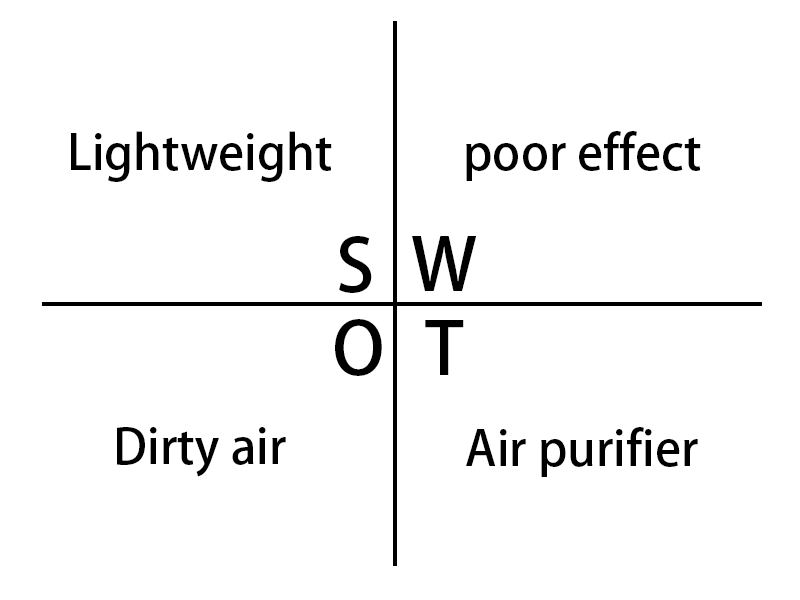
<style>
.page{position:relative;width:800px;height:600px;background:#ffffff}
.page>*{position:absolute;margin:0}
.t1{font:48px "AdobeFanHeitiStd-Bold";color:#000000}
.t2{font:72px "AdobeFanHeitiStd-Bold";color:#000000}
</style>
<div class="page">
<p class="t1" style="left:71px;top:131px;width:261px;height:51px">Lightweight</p>
<p class="t1" style="left:466px;top:131px;width:235px;height:50px">poor effect</p>
<p class="t2" style="left:339px;top:236px;width:33px;height:57px">S</p>
<p class="t2" style="left:412px;top:236px;width:65px;height:55px">W</p>
<p class="t2" style="left:335px;top:319px;width:47px;height:57px">O</p>
<p class="t2" style="left:425px;top:320px;width:39px;height:55px">T</p>
<p class="t1" style="left:117px;top:427px;width:169px;height:50px">Dirty air</p>
<p class="t1" style="left:466px;top:427px;width:232px;height:50px">Air purifier</p>
</div>
